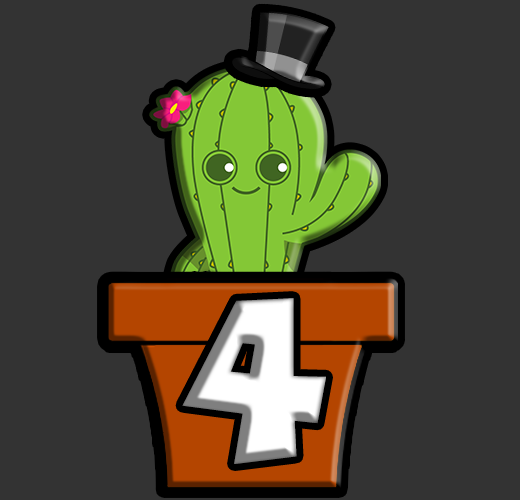
<style>
.page{position:relative;width:520px;height:500px;background:#333333}
.page>*{position:absolute;margin:0}
.t1{font:215.4px "Funhouse";color:#ffffff}
</style>
<div class="page">
<p class="t1" style="left:182px;top:298px;width:144px;height:166px">4</p>
</div>
